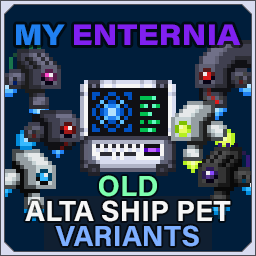
<style>
.page{position:relative;width:256px;height:256px;background:#001e3b}
.page>*{position:absolute;margin:0}
.t1{font:29.2px "AcuminConcept_760.000wght_112.000wdth";color:#8020f0}
.t2{font:29.2px "AcuminConcept_760.000wght_112.000wdth";color:#2080f0}
.t3{font:29.2px/25px "AcuminConcept-Bold";color:#f6f6f6}
.t4{font:29.2px/25px "AcuminConcept-Bold";color:#7effaf}
.t5{font:29.2px/25px "AcuminConcept-Bold";color:#7eafff}
</style>
<div class="page">
<p class="t1" style="left:16px;top:24px;width:225px;height:21px"><span class="t2">MY </span>ENTERNIA</p>
<p class="t3" style="left:25px;top:175px;width:206px;height:72px;text-align:center"><span class="t4">OLD<br></span>ALTA SHIP PET<br><span class="t5">VARIANTS</span></p>
</div>
